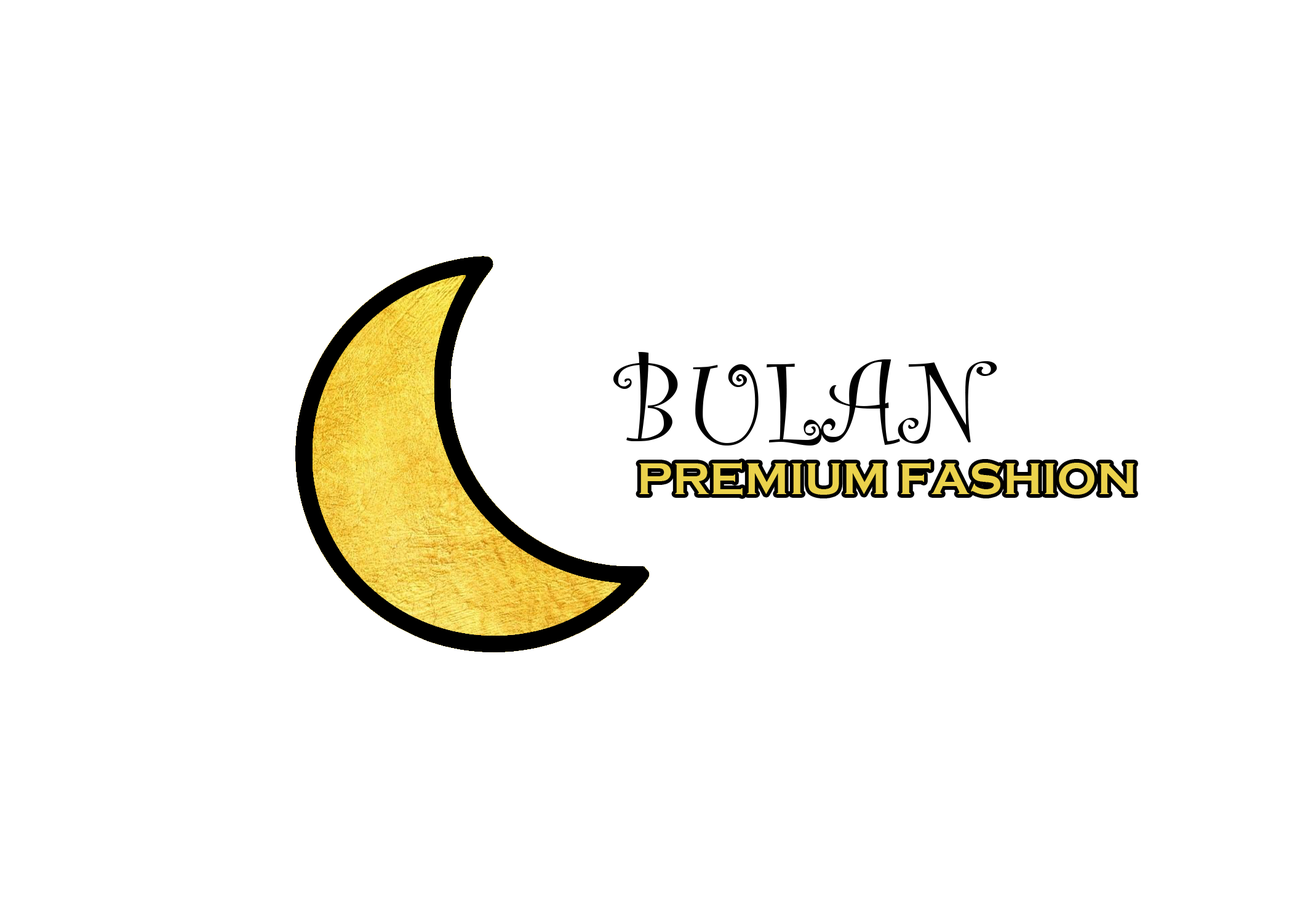
<style>
.page{position:relative;width:1292px;height:923px;background:#ffffff}
.page>*{position:absolute;margin:0}
.t1{font:123.1px "CurlzMT";color:#000000}
.t2{font:46.1px "CopperplateGothic-Bold";color:#ebd24c}
</style>
<div class="page">
<p class="t1" style="left:613px;top:352px;width:384px;height:93px">BULAN</p>
<p class="t2" style="left:639px;top:462px;width:496px;height:33px">PREMIUM FASHION</p>
</div>
